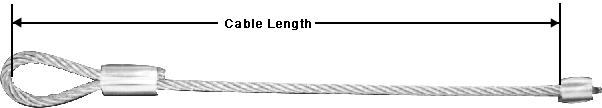
<style>
.page{position:relative;width:602px;height:108px;background:#ffffff}
.page>*{position:absolute;margin:0}
.t1{font:12px "ArialMT";letter-spacing:0.01em;color:#000000;font-weight:bold}
</style>
<div class="page">
<p class="t1" style="left:225px;top:19px;width:86px;height:11px">Cable Length</p>
</div>
